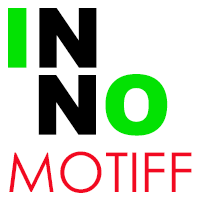
<style>
.page{position:relative;width:200px;height:200px;background:#ffffff}
.page>*{position:absolute;margin:0}
.t1{font:83px "Arial-Black";color:#03e203}
.t2{font:83px "Arial-Black";color:#000000}
.t3{font:55px "CenturyGothic";color:#f20921}
</style>
<div class="page">
<p class="t1" style="left:8px;top:8px;width:89px;height:60px">I<span class="t2">N</span></p>
<p class="t2" style="left:38px;top:74px;width:130px;height:62px">N<span class="t1">O</span></p>
<p class="t3" style="left:9px;top:151px;width:183px;height:42px">MOTIFF</p>
</div>
